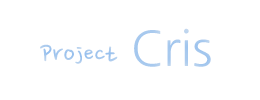
<style>
.page{position:relative;width:260px;height:100px;background:#ffffff}
.page>*{position:absolute;margin:0}
.t1{font:30px "NanumPen";color:#a6c8ee}
.t2{font:48px "NanumGothic";color:#a6c8ee}
</style>
<div class="page">
<p class="t1" style="left:40px;top:28px;width:171px;height:39px">Project <span class="t2">Cris</span></p>
</div>
